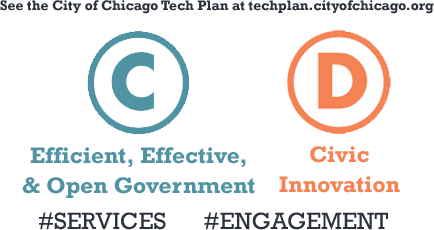
<style>
.page{position:relative;width:434px;height:230px;background:#ffffff}
.page>*{position:absolute;margin:0}
.t1{font:14px "Rockwell-Bold";color:#2b323c}
.t2{font:23px/30px "Rockwell-Bold";color:#5093a2}
.t3{font:23px/30px "Rockwell-Bold";color:#f58355}
.t4{font:24px "Rockwell";color:#2b323c}
</style>
<div class="page">
<p class="t1" style="left:0px;top:0px;width:434px;height:14px">See the City of Chicago Tech Plan at techplan.cityofchicago.org</p>
<p class="t2" style="left:22px;top:147px;width:233px;height:51px;text-align:center">Efficient, Effective,<br>&amp; Open Government</p>
<p class="t3" style="left:279px;top:146px;width:121px;height:47px;text-align:center">Civic<br>Innovation</p>
<p class="t4" style="left:39px;top:212px;width:127px;height:18px">#SERVICES</p>
<p class="t4" style="left:204px;top:212px;width:184px;height:18px">#ENGAGEMENT</p>
</div>
